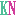
<style>
.page{position:relative;width:16px;height:16px;background:#ffffff}
.page>*{position:absolute;margin:0}
.t1{font:18px "GloucesterMT-ExtraCondensed";color:#4fbe98}
.t2{font:18px "GloucesterMT-ExtraCondensed";color:#d13d9b}
</style>
<div class="page">
<p class="t1" style="left:0px;top:1px;width:16px;height:14px">K<span class="t2">N</span></p>
</div>
